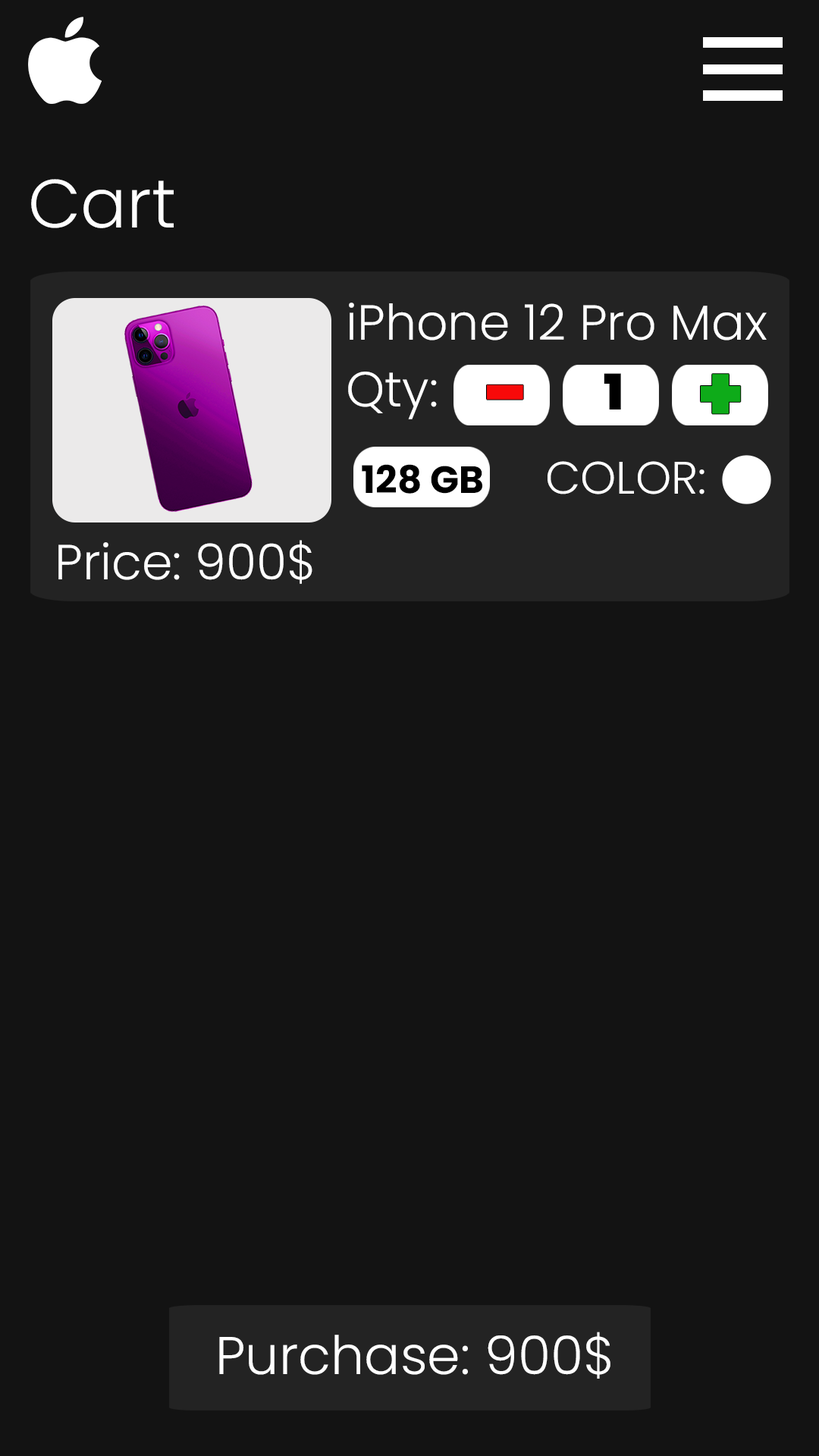
<style>
.page{position:relative;width:819px;height:1456px;background:#131313}
.page>*{position:absolute;margin:0}
.t1{font:68.2px "Poppins-Light";color:#ffffff}
.t2{font:49.3px "Poppins-Light";color:#ffffff}
.t3{font:49.3px "Poppins-Black";color:#000000}
.t4{font:77.3px "Poppins-Black";color:#0eab19}
.t5{font:77.3px "Poppins-Black";color:#f80909}
.t6{font:45.5px "Poppins-Light";color:#ffffff}
.t7{font:37.9px "Poppins-Bold";color:#000000}
.t8{font:53.1px "Poppins-Light";color:#ffffff}
</style>
<div class="page">
<p class="t1" style="left:31px;top:179px;width:143px;height:49px">Cart</p>
<p class="t2" style="left:349px;top:303px;width:418px;height:37px">iPhone 12 Pro Max</p>
<p class="t2" style="left:348px;top:372px;width:89px;height:47px">Qty:</p>
<p class="t3" style="left:604px;top:373px;width:17px;height:36px">1</p>
<p class="t4" style="left:701px;top:374px;width:40px;height:40px">+</p>
<p class="t5" style="left:487px;top:384px;width:36px;height:16px">-</p>
<p class="t6" style="left:548px;top:461px;width:156px;height:33px">COLOR:</p>
<p class="t7" style="left:362px;top:464px;width:120px;height:30px">128 GB</p>
<p class="t2" style="left:58px;top:540px;width:254px;height:44px">Price: 900$</p>
<p class="t8" style="left:219px;top:1332px;width:391px;height:47px">Purchase: 900$</p>
</div>
